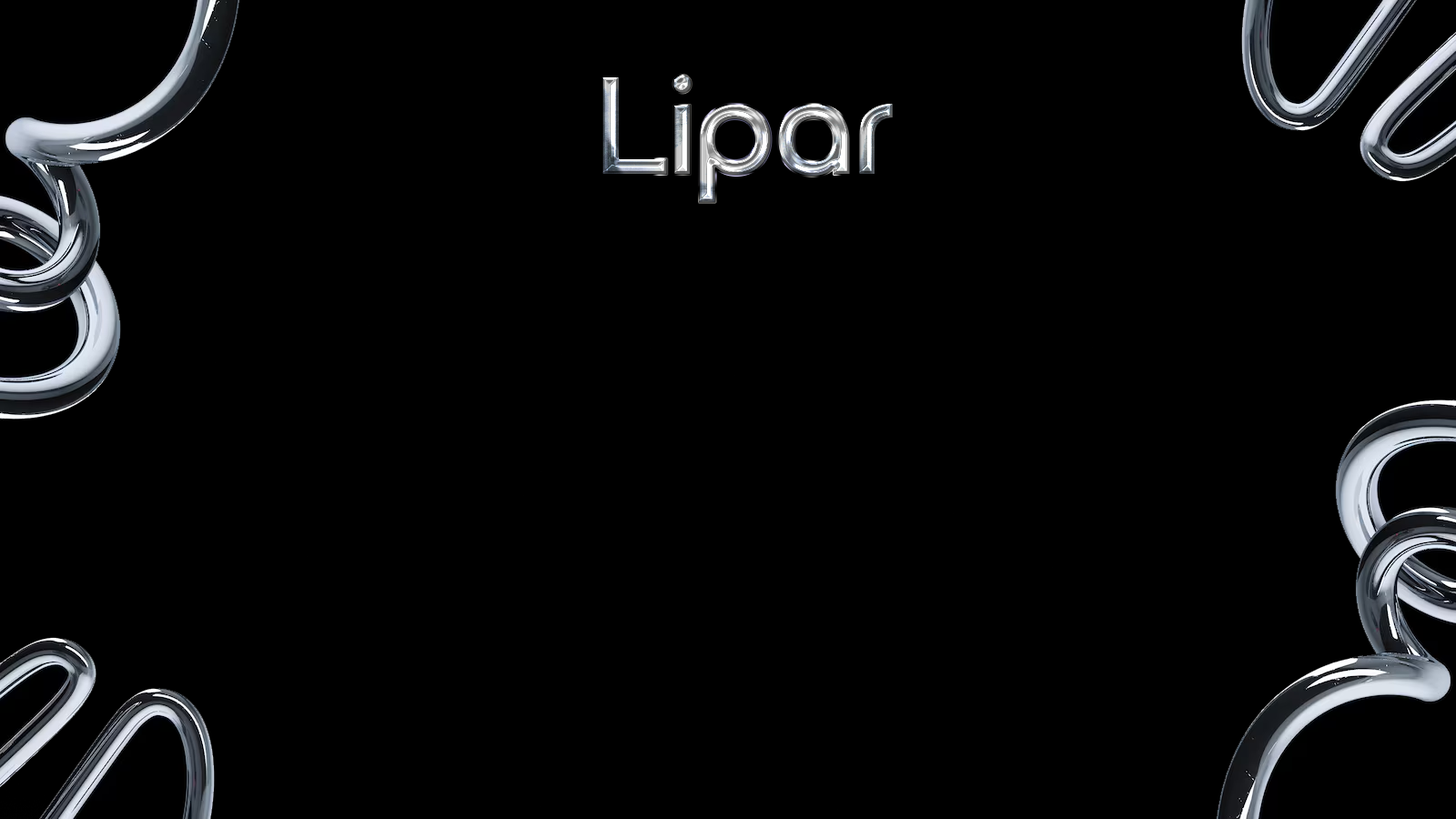
<style>
.page{position:relative;width:1456px;height:819px;background:#000000}
.page>*{position:absolute;margin:0}
.t1{font:140.7px "Ibrand-Regular"}
</style>
<div class="page">
<p class="t1" style="left:602px;top:75px;width:292px;height:128px">Lipar</p>
</div>
